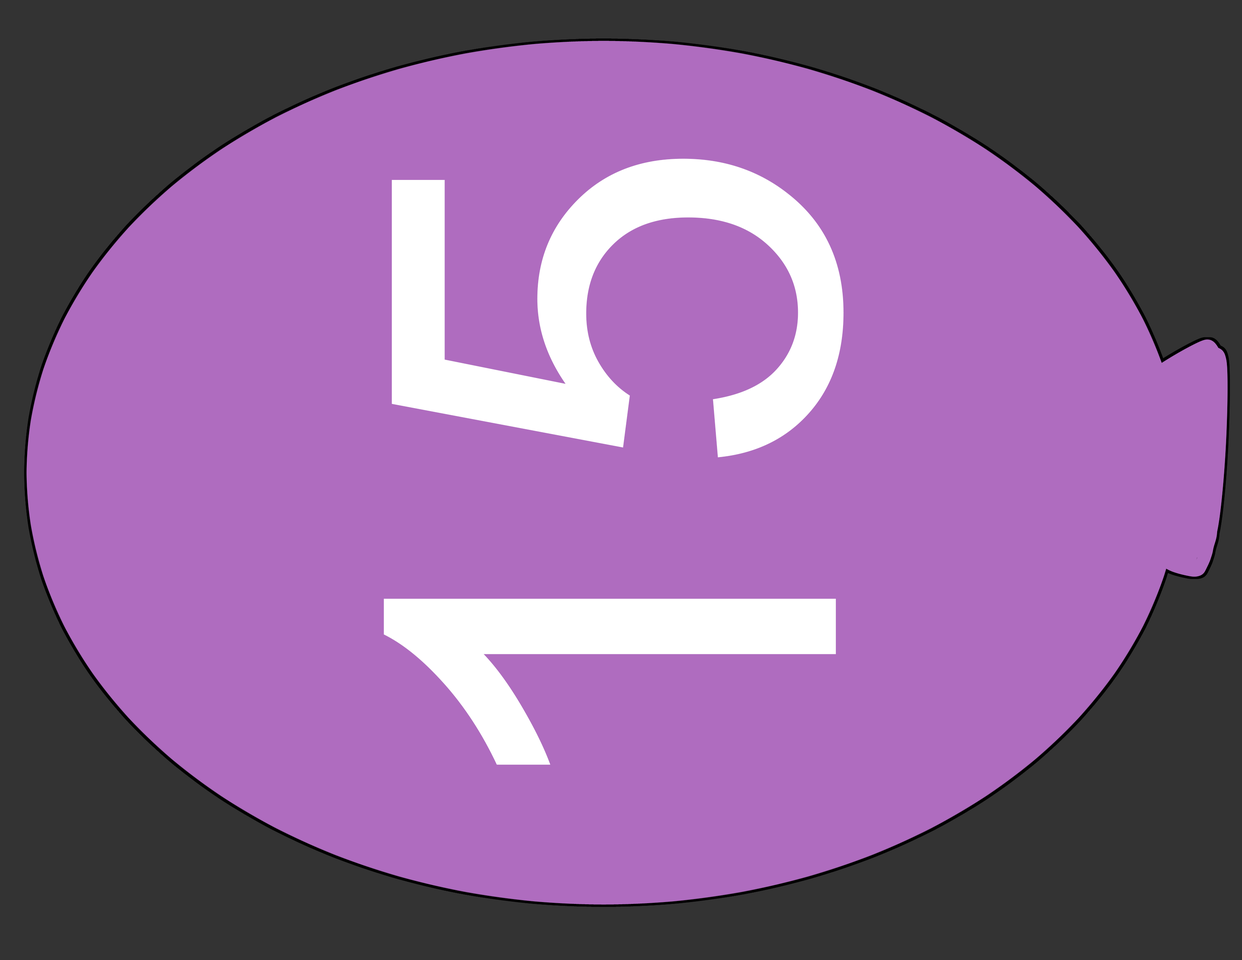
<style>
.page{position:relative;width:1242px;height:960px;background:#af6cbf}
.page>*{position:absolute;margin:0}
.t1{font:629px "ArialMT";color:#ffffff}
</style>
<div class="page">
<p class="t1" style="left:384px;top:158px;width:460px;height:607px;rotate:-90deg">15</p>
</div>
